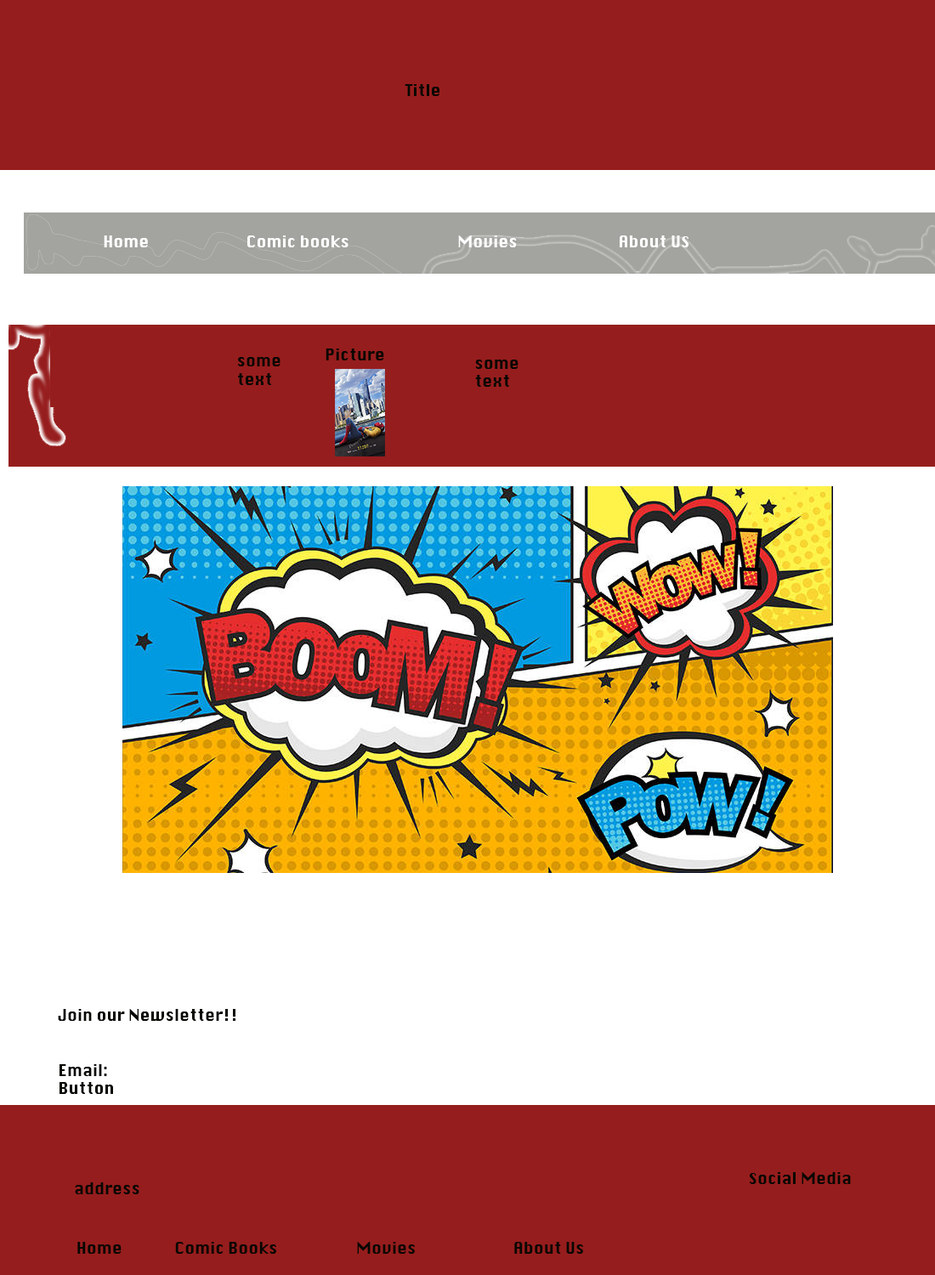
<style>
.page{position:relative;width:935px;height:1275px;background:#961d1d}
.page>*{position:absolute;margin:0}
.t1{font:15.3px "Krungthep";color:#070701}
</style>
<div class="page">
<p class="t1" style="left:405px;top:84px;width:35px;height:12px">Title</p>
<p class="t1" style="left:326px;top:349px;width:58px;height:11px">Picture</p>
<p class="t1" style="left:238px;top:357px;width:43px;height:28px">some <br>text</p>
<p class="t1" style="left:475px;top:360px;width:44px;height:27px">some<br>text</p>
<p class="t1" style="left:58px;top:1009px;width:177px;height:85px">Join our Newsletter!!<br><br><br>Email:<br>Button</p>
<p class="t1" style="left:750px;top:1172px;width:101px;height:12px">Social Media</p>
<p class="t1" style="left:75px;top:1183px;width:64px;height:11px">address</p>
<p class="t1" style="left:77px;top:1242px;width:506px;height:12px">Home              Comic Books                     Movies                          About Us</p>
</div>
